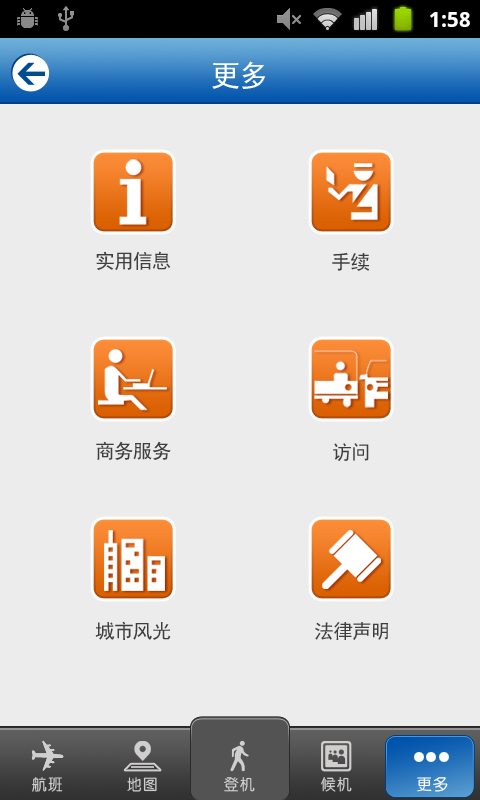
<style>
.page{position:relative;width:480px;height:800px;background:#ececec}
.page>*{position:absolute;margin:0}
.t1{font:30px "SimHei";color:#ffffff;text-transform:uppercase}
.t2{font:20px "SimHei";color:#3e3e3e;text-transform:uppercase}
.t3{font:16px "CTZhongYuanSJ";color:#d1cece}
.t4{font:16px "CTZhongYuanSJ";color:#fffefe}
</style>
<div class="page">
<p class="t1" style="left:212px;top:61px;width:54px;height:28px">更多</p>
<p class="t2" style="left:96px;top:251px;width:75px;height:19px">实用信息</p>
<p class="t2" style="left:332px;top:252px;width:37px;height:19px">手续</p>
<p class="t2" style="left:96px;top:441px;width:75px;height:19px">商务服务</p>
<p class="t2" style="left:333px;top:443px;width:36px;height:18px">访问</p>
<p class="t2" style="left:95px;top:621px;width:76px;height:19px">城市风光</p>
<p class="t2" style="left:315px;top:622px;width:73px;height:18px">法律声明</p>
<p class="t3" style="left:32px;top:777px;width:31px;height:15px">航班</p>
<p class="t3" style="left:127px;top:777px;width:30px;height:15px">地图</p>
<p class="t3" style="left:224px;top:777px;width:31px;height:15px">登机</p>
<p class="t3" style="left:321px;top:777px;width:31px;height:15px">候机</p>
<p class="t4" style="left:417px;top:777px;width:31px;height:15px">更多</p>
</div>
